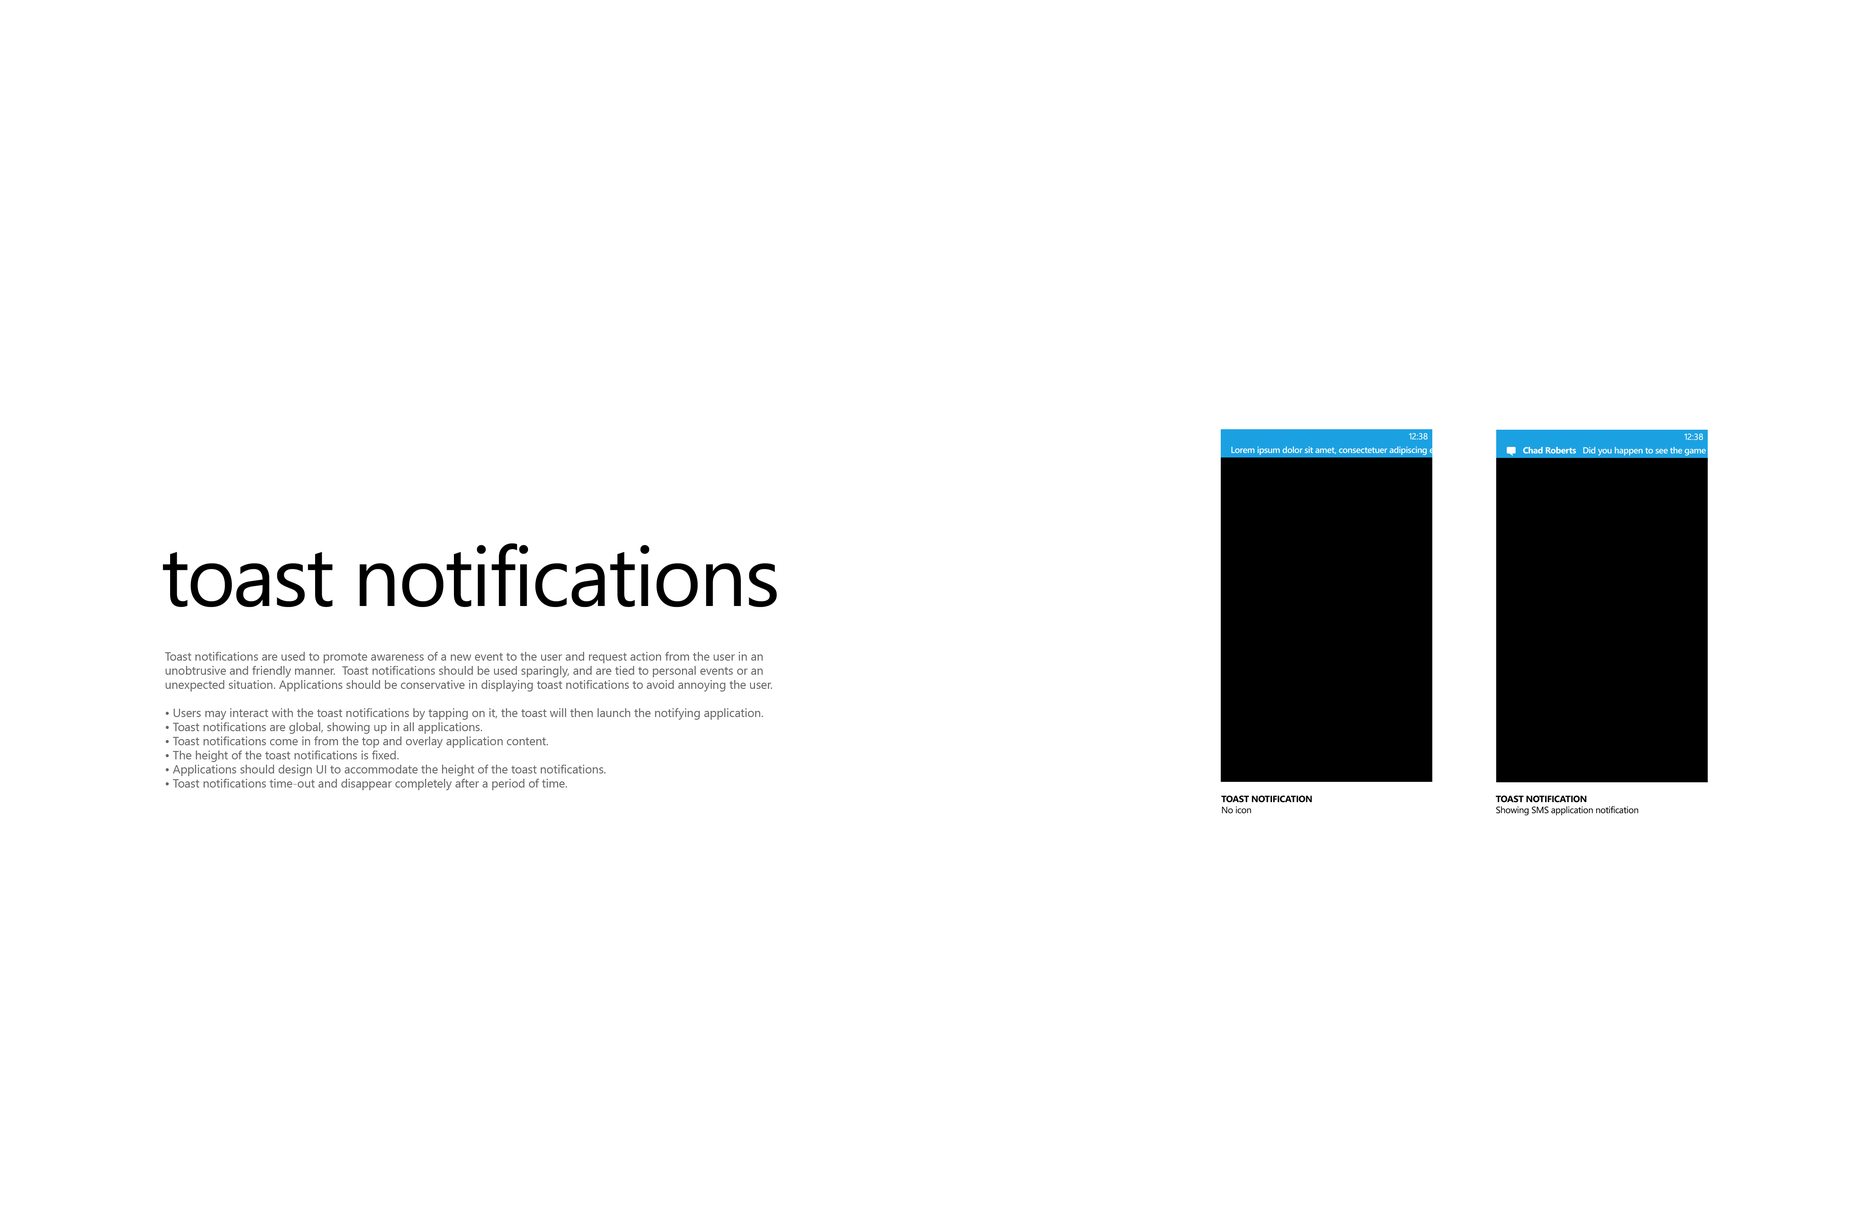
<style>
.page{position:relative;width:1873px;height:1212px;background:#ffffff}
.page>*{position:absolute;margin:0}
.t1{font:8.8px "SegoeWP";color:#ffffff}
.t2{font:8.8px "SegoeWP";letter-spacing:-0.05em;color:#ffffff}
.t3{font:8.8px "SegoeWP-Semibold";letter-spacing:-0.025em;color:#ffffff}
.t4{font:8.8px "SegoeWP-Bold";letter-spacing:-0.025em;color:#ffffff}
.t5{font:8.8px "SegoeWP";letter-spacing:-0.025em;color:#ffffff}
.t6{font:83.5px "SegoeWP";letter-spacing:-0.025em;color:#000000}
.t7{font:11.8px "SegoeUI";color:#666666}
.t8{font:9.2px "SegoeWP-Bold";letter-spacing:-0.025em;color:#000000;text-transform:uppercase}
.t9{font:9.2px "SegoeWP";letter-spacing:-0.025em;color:#000000}
</style>
<div class="page">
<p class="t1" style="left:1409px;top:433px;width:19px;height:7px"><span class="t2">1</span>2:38</p>
<p class="t1" style="left:1685px;top:433px;width:19px;height:7px"><span class="t2">1</span>2:38</p>
<p class="t3" style="left:1232px;top:447px;width:342px;height:8px">Lorem ipsum dolor sit amet, consectetuer adipiscing elit, sed diam nonummy nibh euismod</p>
<p class="t3" style="left:1523px;top:447px;width:223px;height:9px"><span class="t4">Chad Roberts</span>   Did you happen to see the game last <span class="t5">night?</span></p>
<p class="t6" style="left:163px;top:544px;width:614px;height:63px">toast notifications</p>
<p class="t7" style="left:165px;top:652px;width:607px;height:138px">Toast notifications are used to promote awareness of a new event to the user and request action from the user in an unobtrusive and friendly manner.  Toast notifications should be used sparingly, and are tied to personal events or an unexpected situation. Applications should be conservative in displaying toast notifications to avoid annoying the user.<br><br>• Users may interact with the toast notifications by tapping on it, the toast will then launch the notifying application.<br>• Toast notifications are global, showing up in all applications.<br>• Toast notifications come in from the top and overlay application content.<br>• The height of the toast notifications is fixed.<br>• Applications should design UI to accommodate the height of the toast notifications.<br>• Toast notifications time-out and disappear completely after a period of time.</p>
<p class="t8" style="left:1222px;top:796px;width:90px;height:18px">toast notification<br><span class="t9">No icon</span></p>
<p class="t9" style="left:1496px;top:796px;width:143px;height:20px"><span class="t8">toast notification<br></span>Showing SMS application notification</p>
</div>
